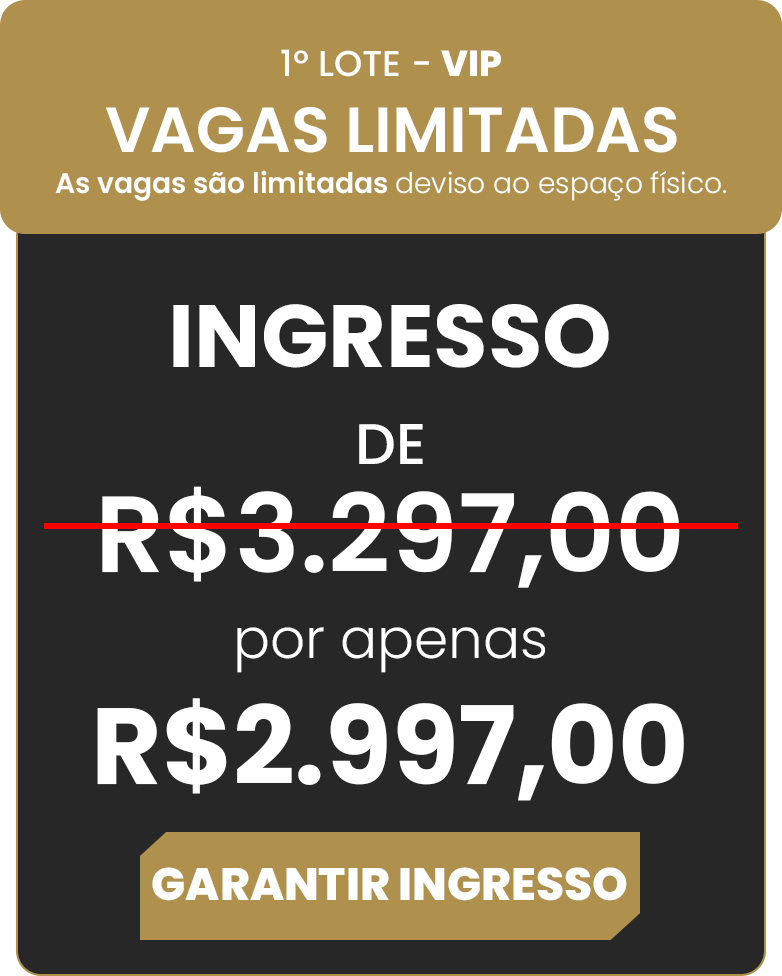
<style>
.page{position:relative;width:782px;height:976px;background:#272727}
.page>*{position:absolute;margin:0}
.t1{font:36px "Poppins-Medium";color:#ffffff}
.t2{font:36px "Poppins-ExtraBold";color:#ffffff}
.t3{font:63.7px "Poppins-SemiBold";color:#ffffff}
.t4{font:28.4px "Poppins-Light";color:#ffffff}
.t5{font:28.4px "Poppins-SemiBold";color:#ffffff}
.t6{font:88.4px "Poppins-Bold";color:#ffffff}
.t7{font:57.3px "Poppins-Medium";color:#ffffff}
.t8{font:108.1px "Poppins-SemiBold";color:#ffffff}
.t9{font:55.2px "Poppins-Light";color:#ffffff}
.t10{font:108.1px "Poppins-Bold";color:#ffffff}
.t11{font:45.6px "Poppins-ExtraBold";color:#ffffff}
</style>
<div class="page">
<p class="t1" style="left:281px;top:49px;width:220px;height:28px">1º LOTE - <span class="t2">VIP</span></p>
<p class="t3" style="left:106px;top:106px;width:571px;height:47px">VAGAS LIMITADAS</p>
<p class="t4" style="left:55px;top:170px;width:672px;height:31px"><span class="t5">As vagas são limitadas </span>deviso ao espaço físico.</p>
<p class="t6" style="left:173px;top:304px;width:436px;height:64px">INGRESSO</p>
<p class="t7" style="left:359px;top:424px;width:64px;height:40px">DE</p>
<p class="t8" style="left:102px;top:486px;width:578px;height:102px">R$3.297,00</p>
<p class="t9" style="left:237px;top:627px;width:308px;height:46px">por apenas</p>
<p class="t10" style="left:97px;top:698px;width:587px;height:103px">R$2.997,00</p>
<p class="t11" style="left:152px;top:867px;width:475px;height:34px">GARANTIR INGRESSO</p>
</div>
